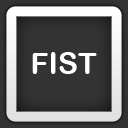
<style>
.page{position:relative;width:128px;height:128px;background:#333333}
.page>*{position:absolute;margin:0}
.t1{font:30px "ArialRoundedMTBold";color:#ffffff}
</style>
<div class="page">
<p class="t1" style="left:32px;top:52px;width:65px;height:22px">FIST</p>
</div>
